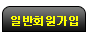
<style>
.page{position:relative;width:89px;height:32px;background:#ffffff}
.page>*{position:absolute;margin:0}
.t1{font:11px "Dotum";letter-spacing:-0.05em;color:#fcff00;font-weight:bold}
</style>
<div class="page">
<p class="t1" style="left:11px;top:16px;width:67px;height:10px">일반회원가입</p>
</div>
